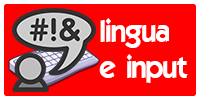
<style>
.page{position:relative;width:200px;height:100px;background:#ff0000}
.page>*{position:absolute;margin:0}
.t1{font:30px "ELEGANCE";color:#ffffff}
</style>
<div class="page">
<p class="t1" style="left:99px;top:18px;width:89px;height:65px">lingua<br>e input</p>
</div>
